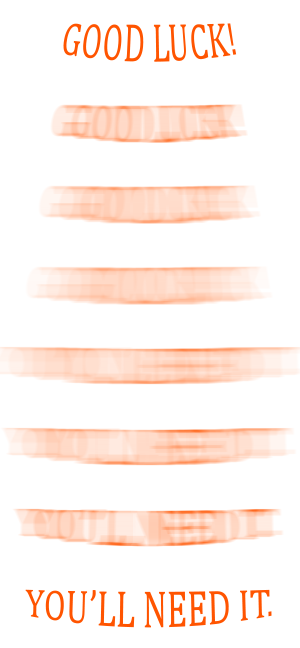
<style>
.page{position:relative;width:300px;height:648px;background:#ffffff}
.page>*{position:absolute;margin:0}
.t1{font:35px "Cambria";color:#ff5400}
</style>
<div class="page">
<p class="t1" style="left:63px;top:23px;width:174px;height:39px">GOOD LUCK!</p>
<p class="t1" style="left:25px;top:589px;width:247px;height:39px">YOU’LL NEED IT.</p>
</div>
